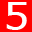
<style>
.page{position:relative;width:32px;height:32px;background:#ff0000}
.page>*{position:absolute;margin:0}
.t1{font:37.7px "Tahoma";color:#fffdfd;scale:1.21 1}
</style>
<div class="page">
<p class="t1" style="left:6px;top:2px;width:21px;height:28px">5</p>
</div>
